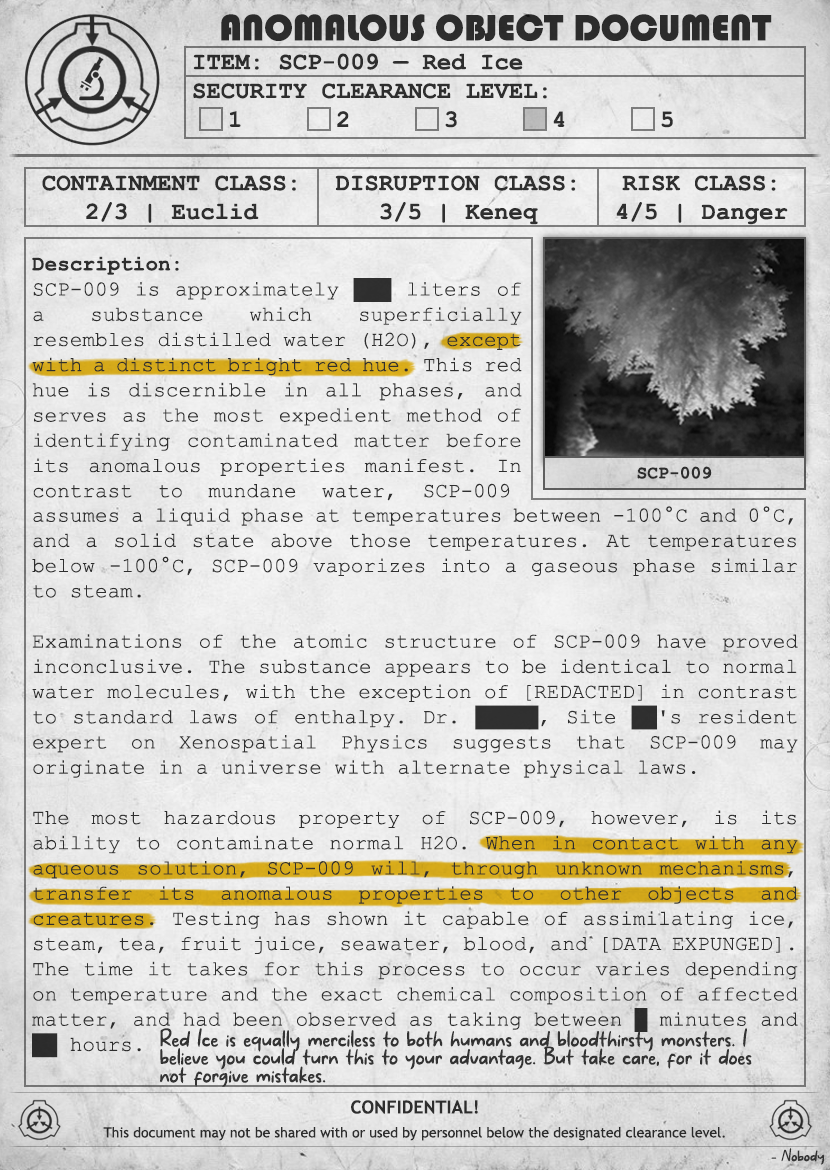
<style>
.page{position:relative;width:830px;height:1170px}
.page>*{position:absolute;margin:0}
.t1{font:38px "Bauhaus93";color:#333333;text-transform:uppercase}
.t2{font:24px "CourierNewPS-BoldMT";color:#333333;text-transform:uppercase}
.t3{font:24px "CourierNewPS-BoldMT";color:#333333}
.t4{font:21px "CourierNewPSMT";color:#333333}
.t5{font:21px "CourierNewPS-BoldMT";color:#333333}
.t6{font:18px "CourierNewPS-BoldMT";color:#333333}
.t7{font:26px/18px "MakanHatiCyrillicRegular";color:#333333}
.t8{font:14px/24px "TrebuchetMS";color:#333333}
.t9{font:18px/24px "TrebuchetMS-Bold";color:#333333}
.t10{font:18px "MakanHatiCyrillicRegular";color:#333333}
</style>
<div class="page">
<p class="t1" style="left:221px;top:14px;width:551px;height:27px">anomalous object document</p>
<p class="t2" style="left:193px;top:53px;width:480px;height:75px"><span class="t3">ITEM: SCP-009 — Red Ice<br></span>Security CLEARANCE LEVEL:<span class="t3"> <br> 1   2   3   4   5</span></p>
<p class="t3" style="left:42px;top:175px;width:254px;height:48px;text-align:center">CONTAINMENT CLASS:<br>2/3 | Euclid</p>
<p class="t3" style="left:335px;top:175px;width:241px;height:50px;text-align:center">DISRUPTION CLASS:<br>3/5 | Keneq</p>
<p class="t3" style="left:616px;top:175px;width:172px;height:50px;text-align:center">RISK CLASS:<br>4/5 | Danger</p>
<p class="t4" style="left:32px;top:256px;width:490px;height:245px;text-align:justify"><span class="t5">Description:<br></span>SCP-009 is approximately ███ liters of a substance which superficially resembles distilled water (H2O), except with a distinct bright red hue. This red hue is discernible in all phases, and serves as the most expedient method of identifying contaminated matter before its anomalous properties manifest. In contrast  to  mundane  water,  SCP-009</p>
<p class="t6" style="left:637px;top:466px;width:75px;height:13px">SCP-009</p>
<p class="t4" style="left:32px;top:506px;width:766px;height:552px;text-align:justify">assumes a liquid phase at temperatures between -100°C and 0°C, and a solid state above those temperatures. At temperatures below -100°C, SCP-009 vaporizes into a gaseous phase similar to steam.<br><br>Examinations of the atomic structure of SCP-009 have proved inconclusive. The substance appears to be identical to normal water molecules, with the exception of [REDACTED] in contrast to standard laws of enthalpy. Dr. █████, Site ██'s resident expert on Xenospatial Physics suggests that SCP-009 may originate in a universe with alternate physical laws.<br><br>The most hazardous property of SCP-009, however, is its ability to contaminate normal H2O. When in contact with any aqueous solution, SCP-009 will, through unknown mechanisms, transfer its anomalous properties to other objects and creatures. Testing has shown it capable of assimilating ice, steam, tea, fruit juice, seawater, blood, and [DATA EXPUNGED]. The time it takes for this process to occur varies depending on temperature and the exact chemical composition of affected matter, and had been observed as taking between █ minutes and ██ hours.</p>
<p class="t7" style="left:160px;top:1028px;width:592px;height:59px">Red Ice is equally merciless to both humans and bloodthirsty monsters. I believe you could turn this to your advantage. But take care, for it does not forgive mistakes.</p>
<p class="t8" style="left:103px;top:1100px;width:622px;height:41px;text-align:center"><span class="t9">CONFIDENTIAL!<br></span>This document may not be shared with or used by personnel below the designated clearance level.</p>
<p class="t10" style="left:771px;top:1148px;width:53px;height:17px">- Nobody</p>
</div>
